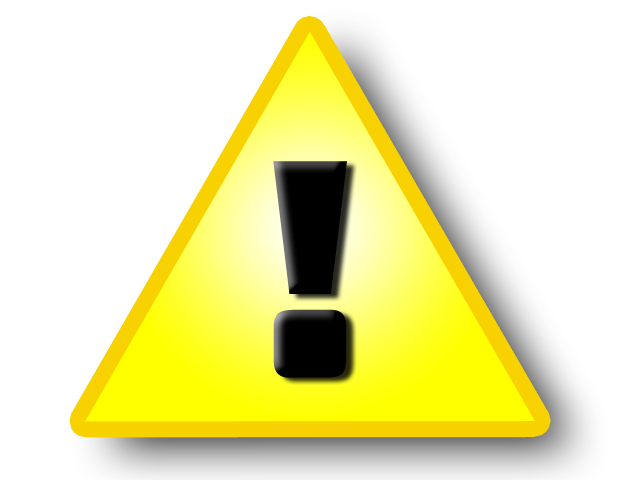
<style>
.page{position:relative;width:640px;height:480px;background:#ffffff}
.page>*{position:absolute;margin:0}
.t1{font:398.1px "BankGothicBT-Medium";letter-spacing:0.02em;color:#000000;font-weight:bold}
</style>
<div class="page">
<p class="t1" style="left:273px;top:161px;width:74px;height:217px">!</p>
</div>
